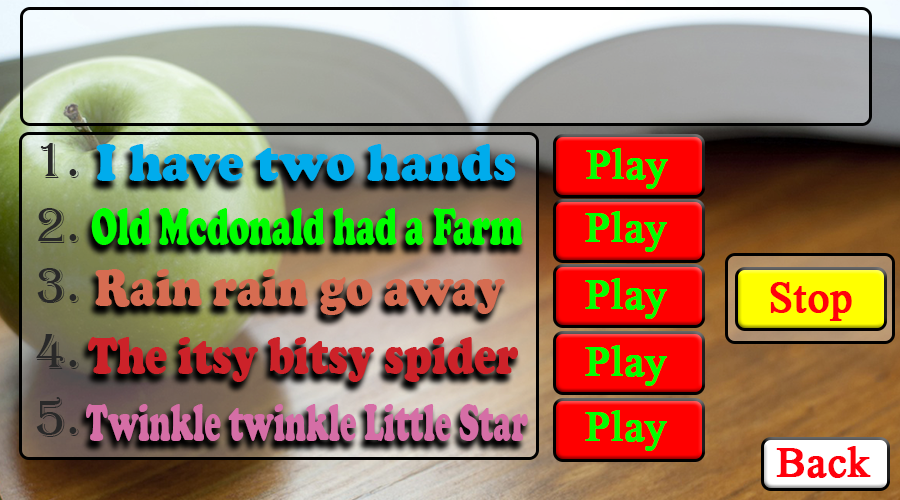
<style>
.page{position:relative;width:900px;height:500px}
.page>*{position:absolute;margin:0}
.t1{font:52.9px "Algerian";color:#292929}
.t2{font:52.9px "CooperBlack";color:#00acec;scale:0.93 1}
.t3{font:63.5px "Microsoft-Himalaya";color:#00ff00;font-weight:bold}
.t4{font:52.9px "CooperBlack";color:#00ff00;scale:0.64 1}
.t5{font:52.9px "CooperBlack";color:#d66c51;scale:0.85 1}
.t6{font:63.5px "Microsoft-Himalaya";color:#ff000c;font-weight:bold}
.t7{font:52.9px "CooperBlack";color:#cc2229;scale:0.79 1}
.t8{font:52.9px "CooperBlack";color:#d56ea6;scale:0.59 1}
</style>
<div class="page">
<p class="t1" style="left:40px;top:143px;width:39px;height:35px">1.</p>
<p class="t2" style="left:96px;top:144px;width:420px;height:37px">I have two hands</p>
<p class="t3" style="left:586px;top:148px;width:82px;height:41px">Play</p>
<p class="t1" style="left:38px;top:208px;width:41px;height:35px">2.</p>
<p class="t4" style="left:91px;top:208px;width:432px;height:37px">Old Mcdonald had a Farm</p>
<p class="t3" style="left:585px;top:211px;width:82px;height:41px">Play</p>
<p class="t1" style="left:37px;top:268px;width:42px;height:35px">3.</p>
<p class="t5" style="left:95px;top:269px;width:410px;height:46px">Rain rain go away</p>
<p class="t3" style="left:585px;top:278px;width:82px;height:41px">Play</p>
<p class="t6" style="left:770px;top:282px;width:82px;height:39px">Stop</p>
<p class="t1" style="left:36px;top:334px;width:43px;height:35px">4.</p>
<p class="t7" style="left:88px;top:337px;width:430px;height:45px">The itsy bitsy spider</p>
<p class="t3" style="left:585px;top:345px;width:82px;height:41px">Play</p>
<p class="t1" style="left:36px;top:397px;width:43px;height:40px">5.</p>
<p class="t8" style="left:86px;top:404px;width:442px;height:37px">Twinkle twinkle Little Star</p>
<p class="t3" style="left:585px;top:410px;width:82px;height:41px">Play</p>
<p class="t6" style="left:776px;top:446px;width:95px;height:32px">Back</p>
</div>
